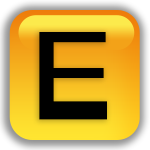
<style>
.page{position:relative;width:150px;height:150px}
.page>*{position:absolute;margin:0}
.t1{font:120px "OpenDyslexic-Regular";letter-spacing:0.005em;color:#000000;scale:1.2 1}
</style>
<div class="page">
<p class="t1" style="left:39px;top:32px;width:68px;height:88px">E</p>
</div>
